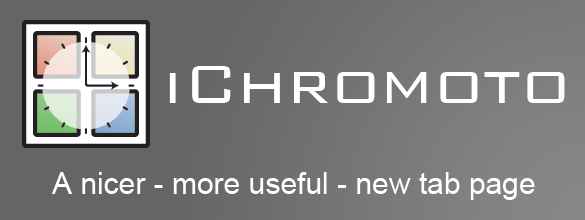
<style>
.page{position:relative;width:585px;height:220px}
.page>*{position:absolute;margin:0}
.t1{font:72px "BankGothic-Light";color:#ffffff}
.t2{font:30px "ArialMT";color:#ffffff}
</style>
<div class="page">
<p class="t1" style="left:169px;top:66px;width:396px;height:37px">iChromoto</p>
<p class="t2" style="left:51px;top:172px;width:484px;height:28px">A nicer - more useful - new tab page</p>
</div>
